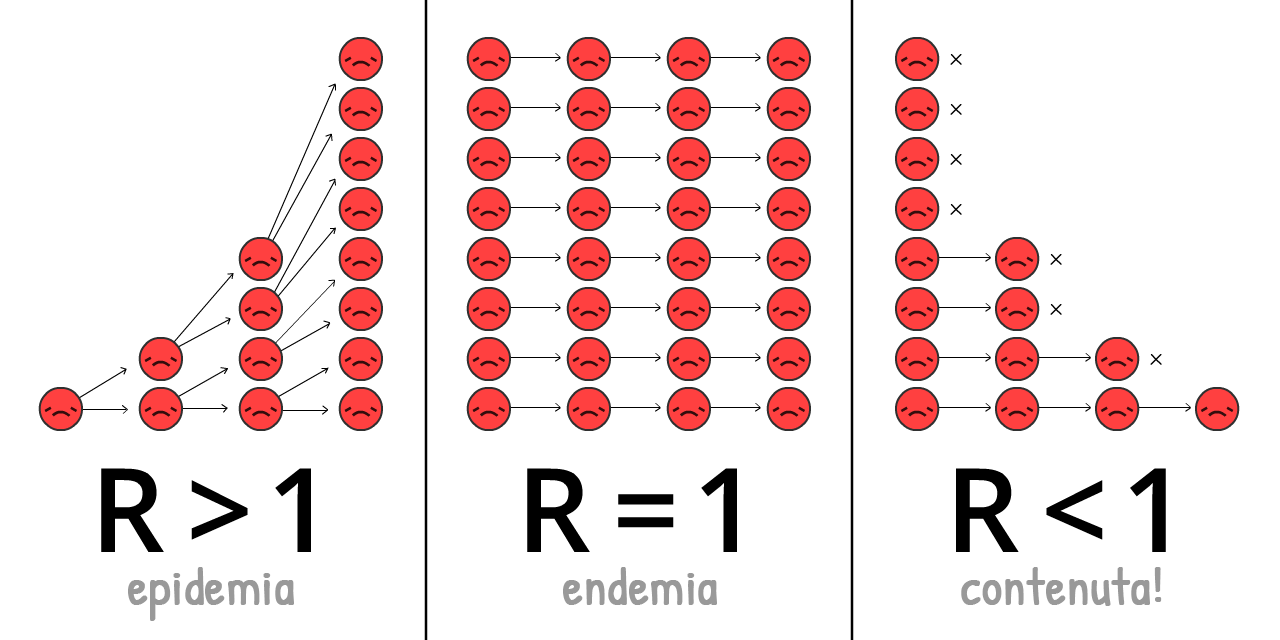
<style>
.page{position:relative;width:1280px;height:640px;background:#ffffff}
.page>*{position:absolute;margin:0}
.t1{font:50px "PatrickHand-Regular";color:#999999;font-weight:bold}
</style>
<div class="page">
<p class="t1" style="left:128px;top:567px;width:166px;height:54px">epidemia</p>
<p class="t1" style="left:563px;top:567px;width:154px;height:38px">endemia</p>
<p class="t1" style="left:961px;top:567px;width:201px;height:39px">contenuta!</p>
</div>
